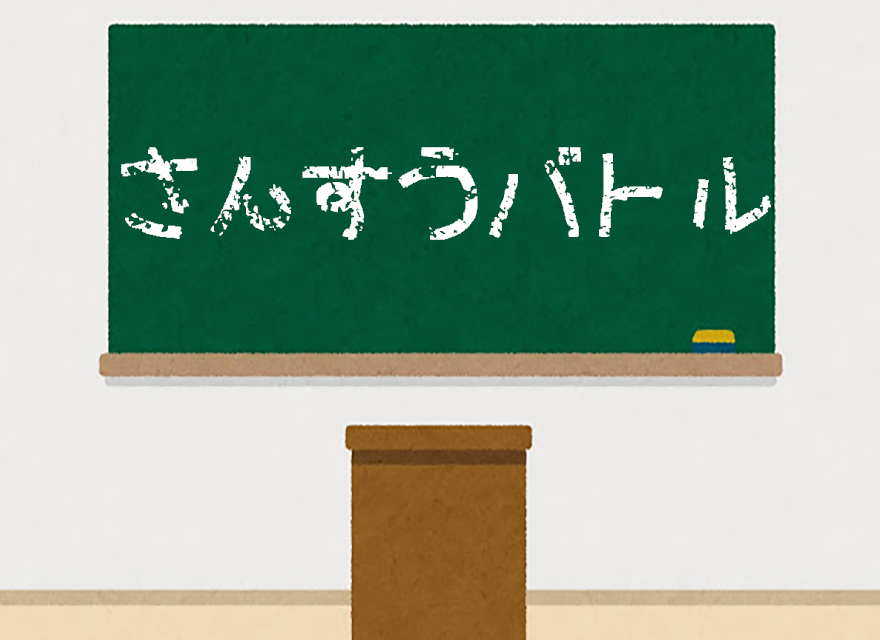
<style>
.page{position:relative;width:880px;height:640px;background:#ecebe9}
.page>*{position:absolute;margin:0}
.t1{font:94.9px "FontFace";color:#ffffff}
</style>
<div class="page">
<p class="t1" style="left:121px;top:147px;width:650px;height:93px">さんすうバトル</p>
</div>
